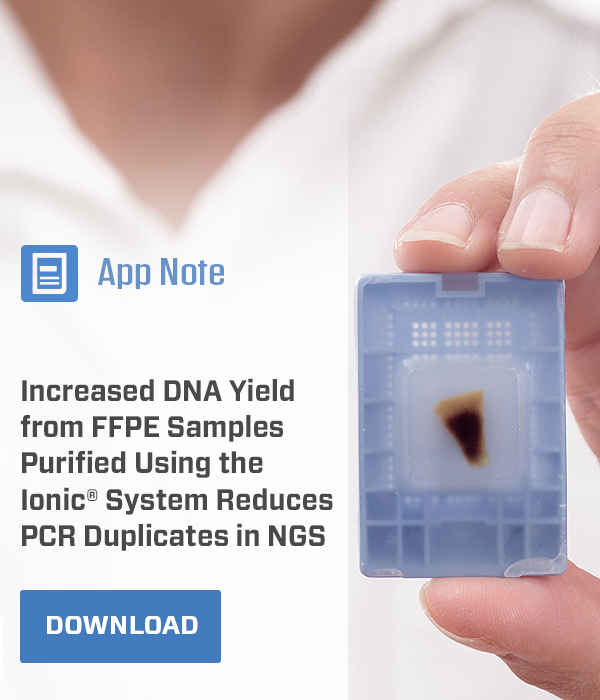
<style>
.page{position:relative;width:600px;height:700px}
.page>*{position:absolute;margin:0}
.t1{font:38.9px "Tungsten-Medium";color:#6993c8;scale:1.4 1}
.t2{font:29.6px/36.4px "Forza-Bold";color:#54565a;scale:0.92 1}
.t3{font:26.2px "Forza-Bold";letter-spacing:-0.01em;color:#ffffff;text-transform:uppercase}
</style>
<div class="page">
<p class="t1" style="left:98px;top:258px;width:126px;height:31px">App Note</p>
<p class="t2" style="left:20px;top:378px;width:313px;height:173px;opacity:0.95">Increased DNA Yield <br>from FFPE Samples <br>Purified Using the <br>Ionic® System Reduces <br>PCR Duplicates in NGS</p>
<p class="t3" style="left:47px;top:616px;width:151px;height:18px">Download</p>
</div>
